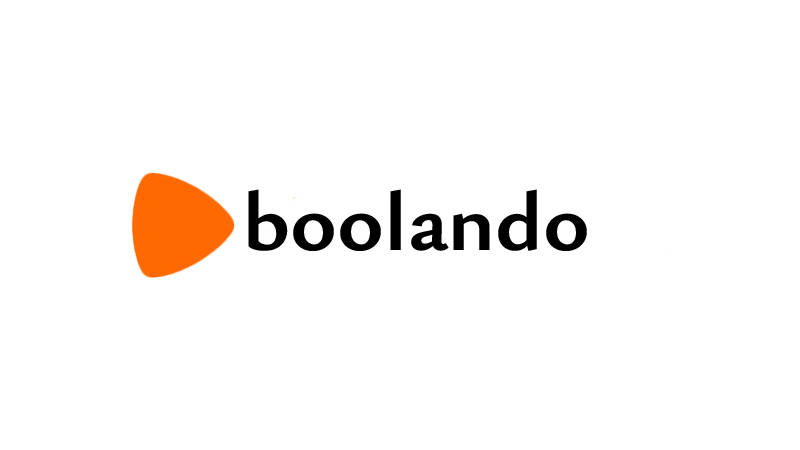
<style>
.page{position:relative;width:800px;height:450px;background:#ffffff}
.page>*{position:absolute;margin:0}
.t1{font:83.8px "YsabeauOffice-Bold";color:#000000;scale:1.05 1}
</style>
<div class="page">
<p class="t1" style="left:248px;top:189px;width:339px;height:62px">boolando</p>
</div>
